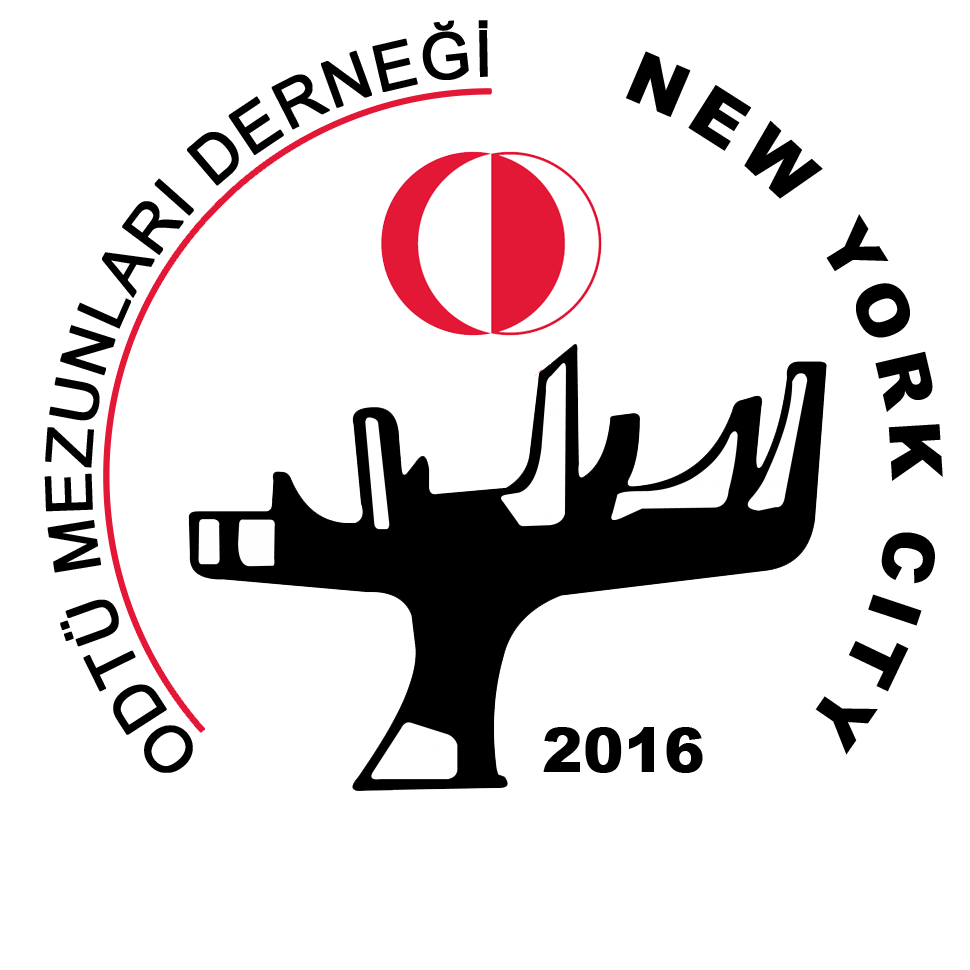
<style>
.page{position:relative;width:970px;height:970px;background:#ffffff}
.page>*{position:absolute;margin:0}
.t1{font:64px "ArialMT";letter-spacing:0.015em;color:#000000;font-weight:bold}
.t2{font:61px "ArialMT";letter-spacing:0.006em;color:#000000;font-weight:bold}
.t3{font:71px "Arial-Black";letter-spacing:0.145em;color:#000000}
.t4{font:71px "Arial-Black";color:#000000;scale:1.1 1}
.t5{font:61px "Arial-Black";color:#000000}
</style>
<div class="page">
<p class="t1" style="left:44px;top:20px;width:444px;height:753px"><span class="t2">                 </span>ODTÜ MEZUNLARI DERNEĞİ</p>
<p class="t3" style="left:626px;top:51px;width:317px;height:704px"><span class="t4">                                                    </span>NEW YORK CITY</p>
<p class="t5" style="left:543px;top:727px;width:160px;height:46px">2016</p>
</div>
